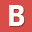
<style>
.page{position:relative;width:32px;height:32px;background:#d94d48}
.page>*{position:absolute;margin:0}
.t1{font:30px "DroidSans-Bold";color:#ffffff}
</style>
<div class="page">
<p class="t1" style="left:9px;top:5px;width:16px;height:21px">B</p>
</div>
